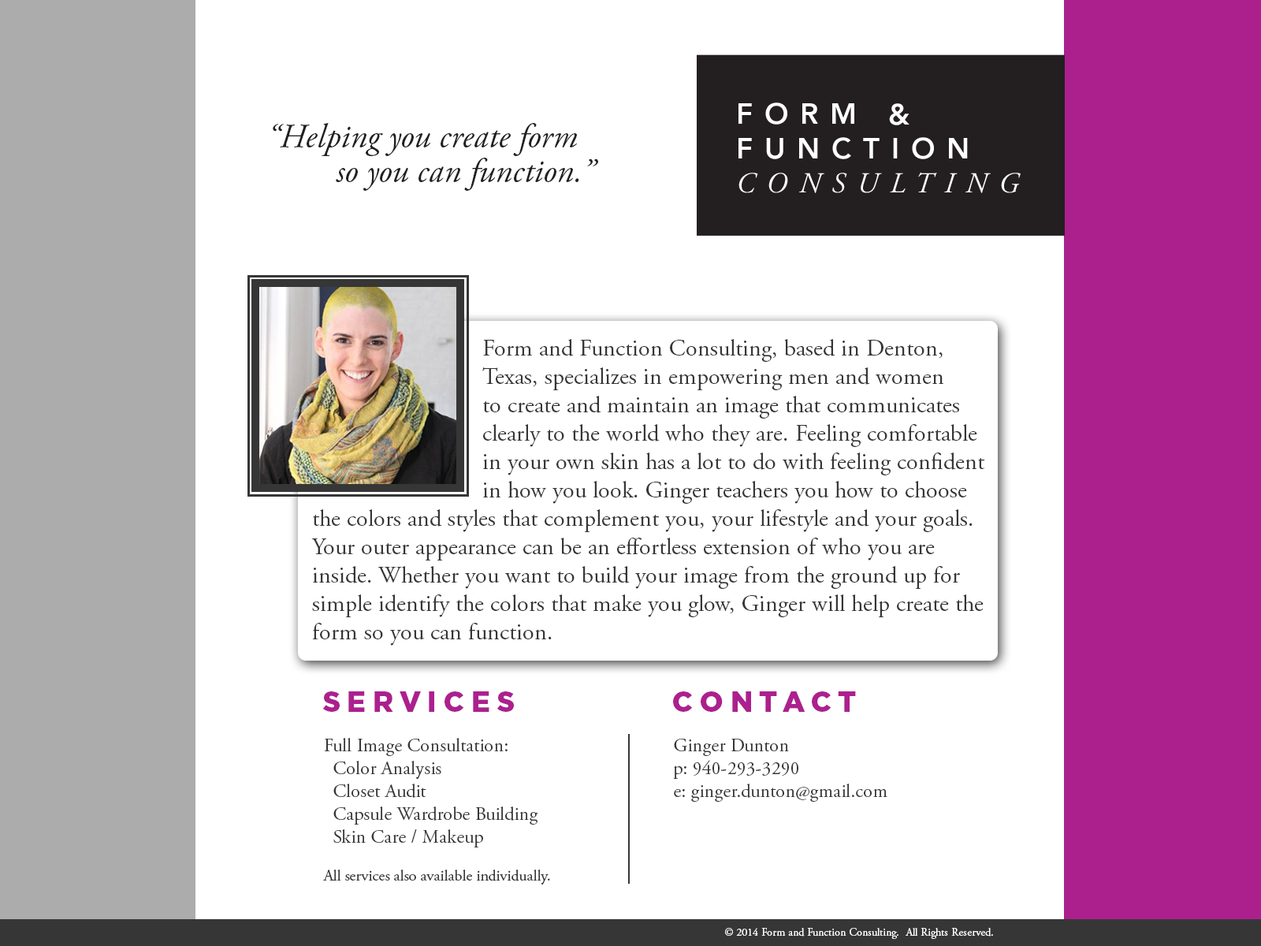
<style>
.page{position:relative;width:1261px;height:946px;background:#ffffff}
.page>*{position:absolute;margin:0}
.t1{font:33.9px "AGaramondPro-Italic";color:#231f20}
.t2{font:23.6px "AGaramondPro-Regular";color:#363636}
.t3{font:28.4px "Gotham-Black";letter-spacing:0.24em;color:#ac208e}
.t4{font:18.9px "AGaramondPro-Regular";color:#363636}
.t5{font:15.8px "AGaramondPro-Regular";color:#363636}
.t6{font:11px "AGaramondPro-Regular";color:#ffffff}
</style>
<div class="page">
<p class="t1" style="left:273px;top:123px;width:304px;height:33px">“Helping you create form</p>
<p class="t1" style="left:336px;top:158px;width:262px;height:33px">so you can function.”</p>
<p class="t2" style="left:311px;top:339px;width:674px;height:306px">Form and Function Consulting, based in Denton, <br>      Texas, specializes in empowering men and women <br>      to create and maintain an image that communicates <br>      clearly to the world who they are. Feeling comfortable <br>      in your own skin has a lot to do with feeling confident <br>      in how you look. Ginger teachers you how to choose the colors and styles that complement you, your lifestyle and your goals. Your outer appearance can be an effortless extension of who you are inside. Whether you want to build your image from the ground up for simple identify the colors that make you glow, Ginger will help create the form so you can function.</p>
<p class="t3" style="left:322px;top:691px;width:192px;height:21px">SERVICES</p>
<p class="t3" style="left:673px;top:691px;width:183px;height:21px">CONTACT</p>
<p class="t4" style="left:323px;top:738px;width:227px;height:146px">Full Image Consultation:<br>  Color Analysis<br>  Closet Audit<br>  Capsule Wardrobe Building<br>  Skin Care / Makeup<br><span class="t5"><br>All services also available individually.</span></p>
<p class="t4" style="left:673px;top:738px;width:214px;height:63px">Ginger Dunton<br>p: 940-293-3290<br>e: ginger.dunton@gmail.com</p>
<p class="t6" style="left:725px;top:928px;width:268px;height:11px">© 2014 Form and Function Consulting.  All Rights Reserved.</p>
</div>
